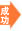
<style>
.page{position:relative;width:22px;height:31px}
.page>*{position:absolute;margin:0}
.t1{font:9px "SimHei";color:#ffffff;font-weight:bold}
</style>
<div class="page">
<p class="t1" style="left:0px;top:6px;width:10px;height:19px">成功</p>
</div>
